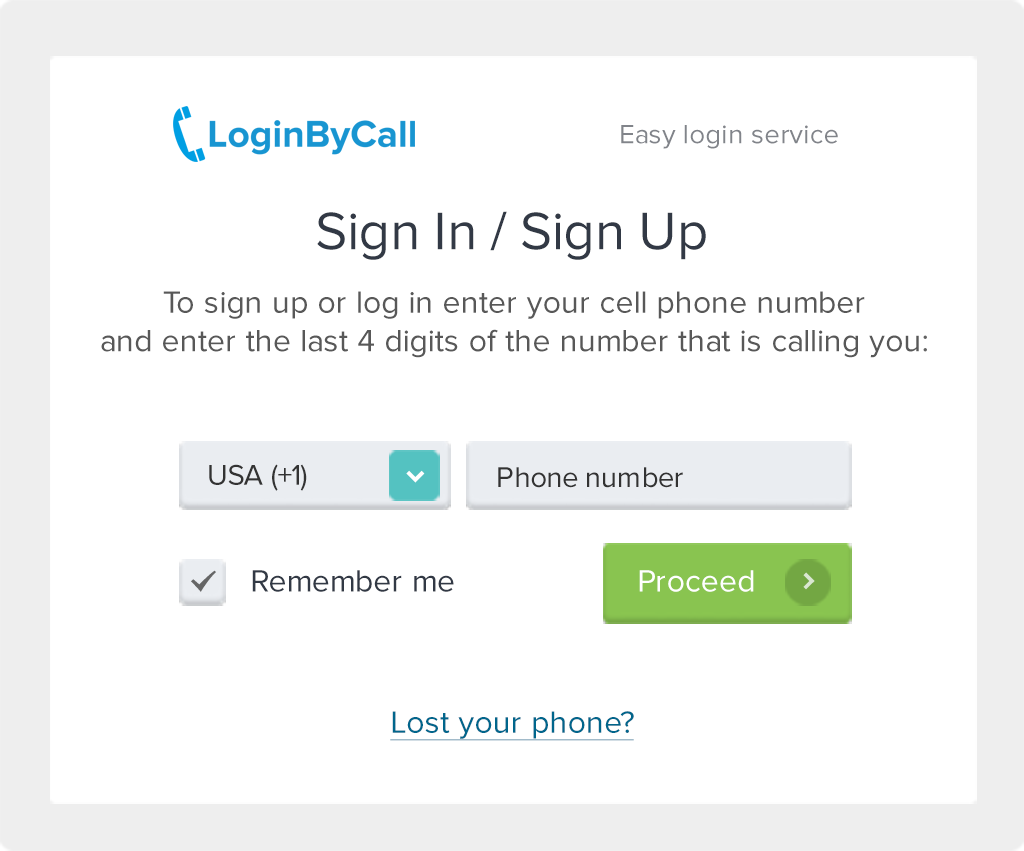
<style>
.page{position:relative;width:1024px;height:851px;background:#ffffff}
.page>*{position:absolute;margin:0}
.t1{font:27.3px "ProximaNova-Regular";color:#81848a}
.t2{font:54.6px "ProximaNova-Regular";color:#323945}
.t3{font:31.9px/38.2px "ProximaNova-Regular";color:#333333}
.t4{font:31.9px/38.2px "ProximaNova-Regular";color:#444444}
.t5{font:29.6px "ProximaNova-Regular";color:#333333}
.t6{font:38.7px "WebSymbolsLiga-Regular";color:#ffffff}
.t7{font:43.2px "WebSymbolsLiga-Regular";color:#666666}
.t8{font:31.9px "ProximaNova-Regular";color:#323945}
.t9{font:31.9px "ProximaNova-Regular";color:#ffffff}
.t10{font:36.4px "WebSymbolsLiga-Regular";color:#dae7d1}
.t11{font:31.9px "ProximaNova-Regular";color:#00668c;text-decoration:underline}
</style>
<div class="page">
<p class="t1" style="left:621px;top:125px;width:217px;height:24px">Easy login service</p>
<p class="t2" style="left:317px;top:211px;width:389px;height:49px">Sign In / Sign Up</p>
<p class="t3" style="left:101px;top:291px;width:826px;height:67px;text-align:center;opacity:0.88">To sign up or log in enter your cell phone number<br>and enter the last 4 digits of the number that is calling you<span class="t4">:</span></p>
<p class="t5" style="left:209px;top:464px;width:98px;height:27px">USA (+1)</p>
<p class="t6" style="left:406px;top:470px;width:19px;height:13px">Ë</p>
<p class="t5" style="left:498px;top:467px;width:185px;height:21px">Phone number</p>
<p class="t7" style="left:191px;top:570px;width:25px;height:22px">õ</p>
<p class="t8" style="left:252px;top:570px;width:202px;height:22px">Remember me</p>
<p class="t9" style="left:639px;top:570px;width:115px;height:22px">Proceed</p>
<p class="t10" style="left:803px;top:572px;width:12px;height:18px">×</p>
<p class="t11" style="left:390px;top:711px;width:244px;height:30px">Lost your phone?</p>
</div>
